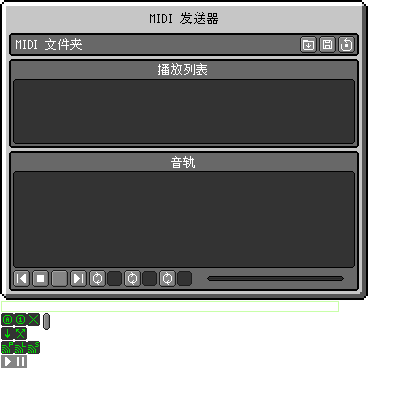
<style>
.page{position:relative;width:400px;height:400px;background:#333333}
.page>*{position:absolute;margin:0}
.t1{font:12px "mplus_hzk_12";color:#000000}
.t2{font:11.7px "mplus_hzk_12";color:#ffffff}
</style>
<div class="page">
<p class="t1" style="left:150px;top:12px;width:68px;height:12px">MIDI 发送器</p>
<p class="t2" style="left:16px;top:38px;width:66px;height:12px">MIDI 文件夹</p>
<p class="t2" style="left:158px;top:63px;width:49px;height:12px">播放列表</p>
<p class="t2" style="left:171px;top:156px;width:24px;height:12px">音轨</p>
</div>
